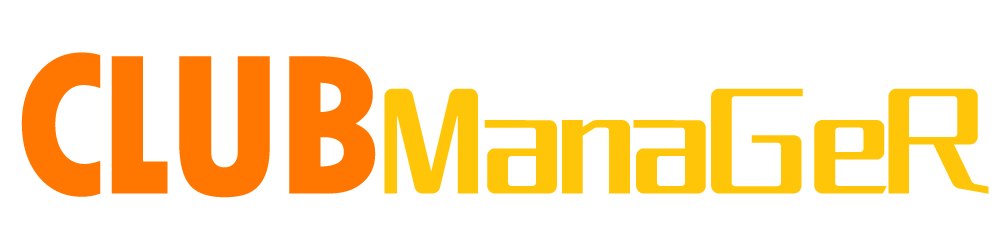
<style>
.page{position:relative;width:1000px;height:250px;background:#ffffff}
.page>*{position:absolute;margin:0}
.t1{font:210px "TwCenMT-CondensedExtraBold";letter-spacing:-0.04em;color:#ff7700}
.t2{font:130.7px "HuXiaoBo-NanShen";letter-spacing:-0.02em;color:#ffc609}
</style>
<div class="page">
<p class="t1" style="left:21px;top:52px;width:355px;height:146px">CLUB</p>
<p class="t2" style="left:384px;top:88px;width:605px;height:106px">ManaGeR</p>
</div>
